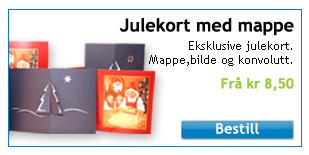
<style>
.page{position:relative;width:309px;height:155px;background:#ffffff}
.page>*{position:absolute;margin:0}
.t1{font:18px "TrebuchetMS-Bold";color:#040608}
.t2{font:12px "TrebuchetMS";color:#000000}
.t3{font:14px "TrebuchetMS-Bold";color:#96ca37}
.t4{font:14px "TrebuchetMS";color:#fafbf8;font-weight:bold;scale:1.06 1}
</style>
<div class="page">
<p class="t1" style="left:119px;top:17px;width:175px;height:19px">Julekort med mappe</p>
<p class="t2" style="left:149px;top:41px;width:143px;height:25px;text-align:right">Eksklusive julekort.<br>Mappe,bilde og konvolutt.</p>
<p class="t3" style="left:221px;top:77px;width:73px;height:15px">Frå kr 8,50</p>
<p class="t4" style="left:216px;top:123px;width:43px;height:11px">Bestill</p>
</div>
